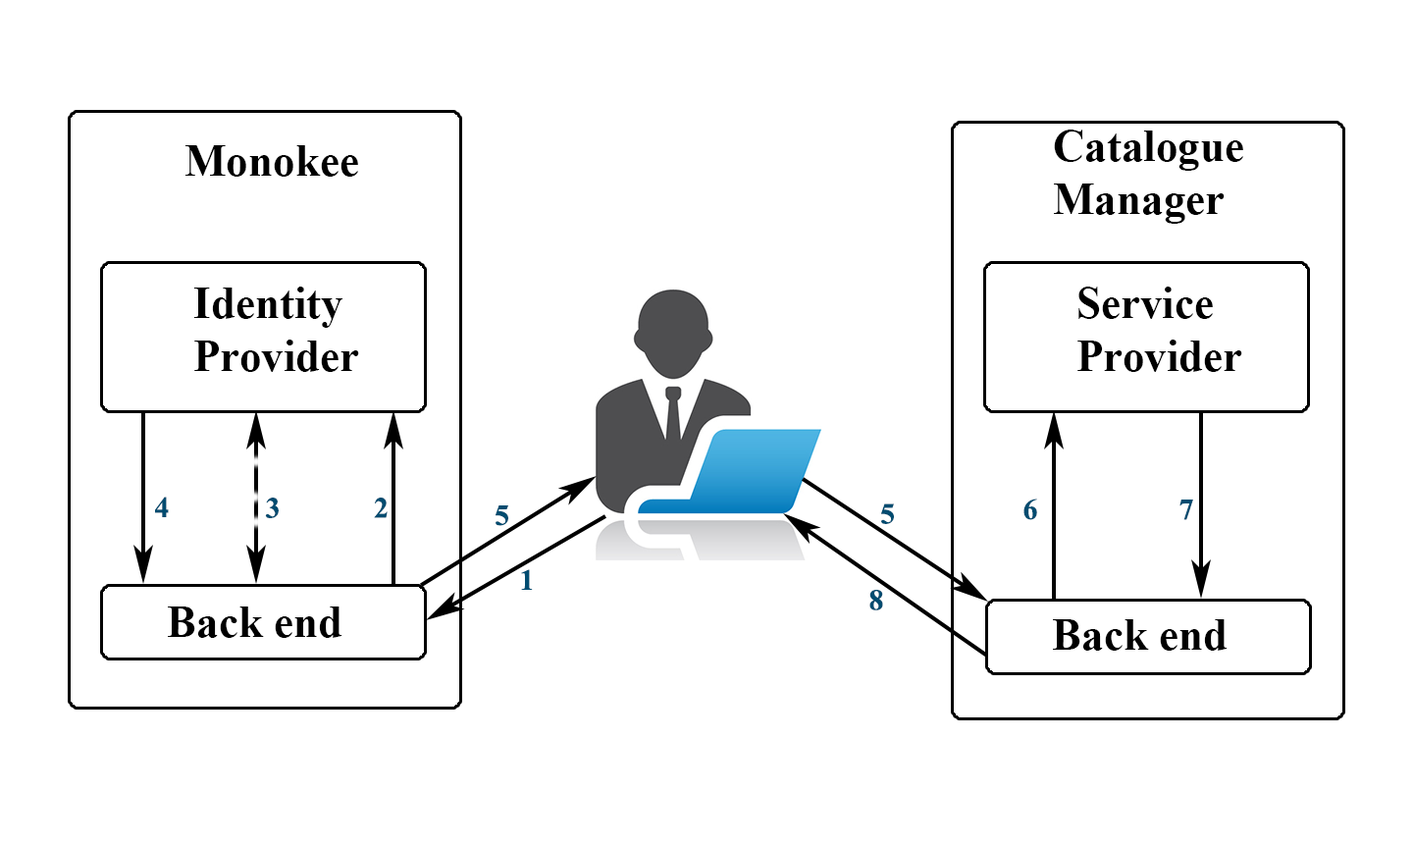
<style>
.page{position:relative;width:1413px;height:844px;background:#ffffff}
.page>*{position:absolute;margin:0}
.t1{font:44.1px "TimesNewRomanPS-BoldMT";color:#000000}
.t2{font:44.2px "TimesNewRomanPS-BoldMT";color:#000000}
.t3{font:29.4px "TimesNewRomanPS-BoldMT";color:#004c70}
</style>
<div class="page">
<p class="t1" style="left:1054px;top:130px;width:189px;height:94px">Catalogue<br>Manager</p>
<p class="t2" style="left:185px;top:145px;width:173px;height:32px">Monokee</p>
<p class="t2" style="left:193px;top:287px;width:166px;height:85px">Identity <br>Provider</p>
<p class="t2" style="left:1077px;top:287px;width:165px;height:85px">Service<br>Provider</p>
<p class="t3" style="left:155px;top:497px;width:14px;height:20px">4</p>
<p class="t3" style="left:265px;top:498px;width:14px;height:20px">3</p>
<p class="t3" style="left:374px;top:498px;width:14px;height:20px">2</p>
<p class="t3" style="left:496px;top:505px;width:12px;height:21px">5</p>
<p class="t3" style="left:881px;top:503px;width:13px;height:21px">5</p>
<p class="t3" style="left:1023px;top:498px;width:14px;height:22px">6</p>
<p class="t3" style="left:1179px;top:499px;width:14px;height:21px">7</p>
<p class="t3" style="left:521px;top:569px;width:12px;height:21px">1</p>
<p class="t3" style="left:869px;top:590px;width:14px;height:20px">8</p>
<p class="t2" style="left:168px;top:606px;width:174px;height:32px">Back end</p>
<p class="t2" style="left:1053px;top:619px;width:175px;height:32px">Back end</p>
</div>
